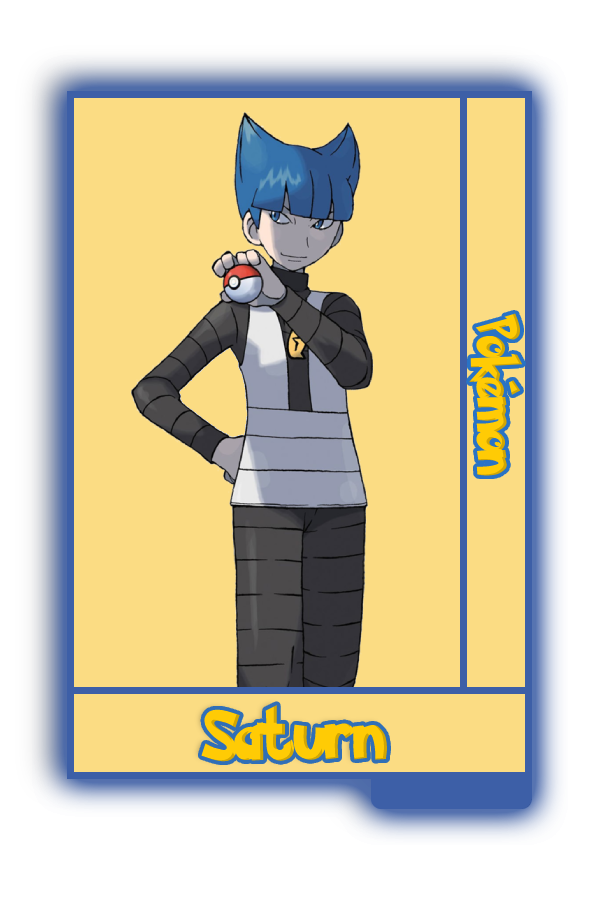
<style>
.page{position:relative;width:600px;height:900px;background:#fbdc83}
.page>*{position:absolute;margin:0}
.t1{font:48.8px "PokemonSolidNormal";color:#ffcb05;scale:0.8 1}
.t2{font:56.6px "PokemonSolidNormal";color:#ffcb05;scale:0.92 1}
</style>
<div class="page">
<p class="t1" style="left:469px;top:313px;width:54px;height:163px;rotate:90deg">Pokémon</p>
<p class="t2" style="left:201px;top:705px;width:187px;height:57px">Saturn</p>
</div>
